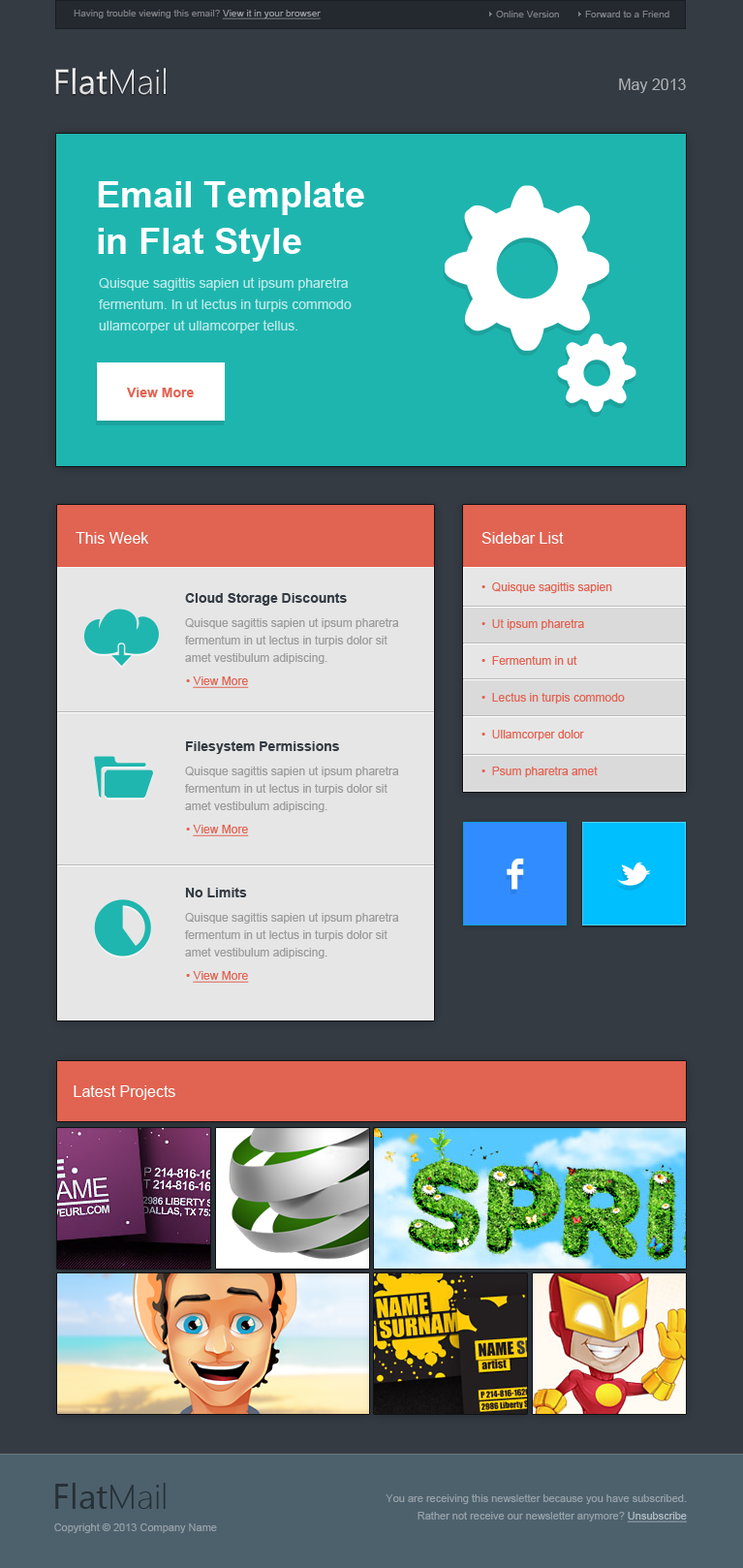
<style>
.page{position:relative;width:743px;height:1568px;background:#343b43}
.page>*{position:absolute;margin:0}
.t1{font:9.7px "ArialMT";color:#7c7f83}
.t2{font:9.7px "ArialMT";color:#969a9f;text-decoration:underline}
.t3{font:15.5px "ArialMT";color:#aeb1b4}
.t4{font:36.8px/46.5px "Arial-BoldMT";color:#ffffff}
.t5{font:13.6px/21.3px "ArialMT";color:#bce9e7}
.t6{font:13.6px "Arial-BoldMT";color:#e26352}
.t7{font:15.5px "ArialMT";color:#ffffff}
.t8{font:13.6px "Arial-BoldMT";color:#343b43}
.t9{font:11.6px/36.8px "ArialMT";color:#e26352}
.t10{font:11.6px/17.4px "ArialMT";color:#9b9b9b}
.t11{font:11.6px "ArialMT";color:#e26352;text-decoration:underline}
.t12{font:11.6px "ArialMT";color:#e26352}
.t13{font:34.9px "SegoeUI";color:#263036}
.t14{font:34.9px "SegoeUI-Light";color:#263036}
.t15{font:10.7px/17.4px "ArialMT";color:#95a0a7}
.t16{font:10.7px/17.4px "ArialMT";color:#b2bcc3;text-decoration:underline}
.t17{font:10.7px "ArialMT";color:#95a0a7}
</style>
<div class="page">
<p class="t1" style="left:74px;top:10px;width:247px;height:9px">Having trouble viewing this email? <span class="t2">View it in your browser</span></p>
<p class="t1" style="left:496px;top:11px;width:63px;height:6px">Online Version</p>
<p class="t1" style="left:585px;top:11px;width:85px;height:6px">Forward to a Friend</p>
<p class="t3" style="left:619px;top:78px;width:67px;height:15px">May 2013</p>
<p class="t4" style="left:98px;top:181px;width:266px;height:81px">Email Template<br>in Flat Style</p>
<p class="t5" style="left:99px;top:277px;width:253px;height:56px">Quisque sagittis sapien ut ipsum pharetra fermentum. In ut lectus in turpis commodo ullamcorper ut ullamcorper tellus.</p>
<p class="t6" style="left:127px;top:388px;width:67px;height:9px">View More</p>
<p class="t7" style="left:76px;top:532px;width:72px;height:12px">This Week</p>
<p class="t7" style="left:482px;top:532px;width:82px;height:12px">Sidebar List</p>
<p class="t8" style="left:185px;top:593px;width:162px;height:13px">Cloud Storage Discounts</p>
<p class="t9" style="left:482px;top:582px;width:143px;height:195px">•  Quisque sagittis sapien<br>•  Ut ipsum pharetra <br>•  Fermentum in ut<br>•  Lectus in turpis commodo <br>•  Ullamcorper dolor<br>•  Psum pharetra amet</p>
<p class="t10" style="left:185px;top:618px;width:214px;height:46px">Quisque sagittis sapien ut ipsum pharetra fermentum in ut lectus in turpis dolor sit amet vestibulum adipiscing.</p>
<p class="t11" style="left:186px;top:676px;width:63px;height:12px"><span class="t12">• </span>View More</p>
<p class="t8" style="left:186px;top:741px;width:153px;height:13px">Filesystem Permissions</p>
<p class="t10" style="left:185px;top:767px;width:214px;height:45px">Quisque sagittis sapien ut ipsum pharetra fermentum in ut lectus in turpis dolor sit amet vestibulum adipiscing.</p>
<p class="t11" style="left:186px;top:825px;width:63px;height:11px"><span class="t12">• </span>View More</p>
<p class="t8" style="left:185px;top:888px;width:62px;height:9px">No Limits</p>
<p class="t10" style="left:185px;top:913px;width:214px;height:45px">Quisque sagittis sapien ut ipsum pharetra fermentum in ut lectus in turpis dolor sit amet vestibulum adipiscing.</p>
<p class="t11" style="left:186px;top:971px;width:63px;height:12px"><span class="t12">• </span>View More</p>
<p class="t7" style="left:74px;top:1085px;width:101px;height:15px">Latest Projects</p>
<p class="t13" style="left:55px;top:1483px;width:111px;height:26px">Flat<span class="t14">Mail</span></p>
<p class="t15" style="left:386px;top:1494px;width:301px;height:28px;text-align:right">You are receiving this newsletter because you have subscribed.<br>Rather not receive our newsletter anymore? <span class="t16">Unsubscribe</span></p>
<p class="t17" style="left:54px;top:1523px;width:163px;height:10px">Copyright © 2013 Company Name</p>
</div>
